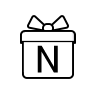
<style>
.page{position:relative;width:96px;height:96px;background:#ffffff}
.page>*{position:absolute;margin:0}
.t1{font:40px "MS-UIGothic";letter-spacing:-0.05em;color:#010101}
</style>
<div class="page">
<p class="t1" style="left:37px;top:45px;width:21px;height:28px">N</p>
</div>
